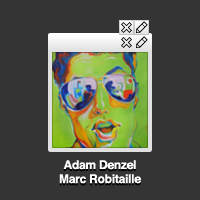
<style>
.page{position:relative;width:200px;height:200px;background:#343434}
.page>*{position:absolute;margin:0}
.t1{font:12px/14px "Helvetica-Bold";letter-spacing:-0.02em;color:#ffffff}
</style>
<div class="page">
<p class="t1" style="left:59px;top:160px;width:82px;height:24px;text-align:center">Adam Denzel Marc Robitaille</p>
</div>
